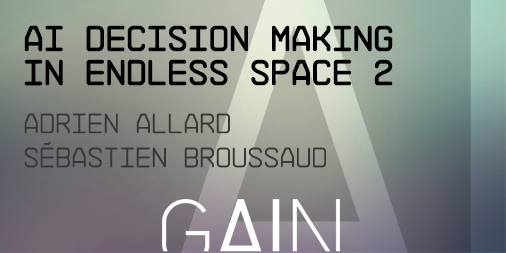
<style>
.page{position:relative;width:506px;height:253px}
.page>*{position:absolute;margin:0}
.t1{font:36px/34.1px "NBArchitekt";color:#000000}
.t2{font:28px/48px "NBArchitekt-Light";color:#363737}
.t3{font:28px/34.1px "NBArchitekt-Light";color:#363737}
</style>
<div class="page">
<p class="t1" style="left:24px;top:25px;width:369px;height:143px">AI Decision Making<br>in Endless Space 2<br><span class="t2">ADRIEN ALLARD<br></span><span class="t3">SÉBASTIEN BROUSSAUD</span></p>
</div>
